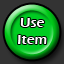
<style>
.page{position:relative;width:64px;height:64px;background:#333333}
.page>*{position:absolute;margin:0}
.t1{font:14px "ErasITC-Demi";color:#ffffff}
</style>
<div class="page">
<p class="t1" style="left:18px;top:18px;width:29px;height:26px;text-align:center">Use<br>Item</p>
</div>
